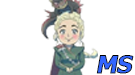
<style>
.page{position:relative;width:135px;height:75px;background:#ffffff}
.page>*{position:absolute;margin:0}
.t1{font:24px "Tahoma-Bold";letter-spacing:-0.065em;font-weight:bold;font-style:italic}
</style>
<div class="page">
<p class="t1" style="left:96px;top:55px;width:38px;height:19px">MS</p>
</div>
